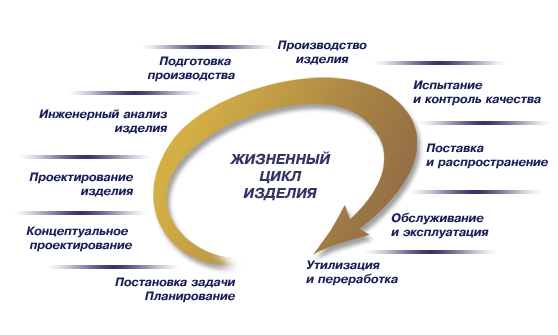
<style>
.page{position:relative;width:558px;height:335px;background:#ffffff}
.page>*{position:absolute;margin:0}
.t1{font:12px "PragmaticaBoldItalic";color:#1a1f57}
.t2{font:14px "PragmaticaBoldItalic";color:#333366}
</style>
<div class="page">
<p class="t1" style="left:277px;top:40px;width:90px;height:25px;text-align:center">Ïðîèçâîäñòâî<br>èçäåëèÿ</p>
<p class="t1" style="left:147px;top:56px;width:88px;height:26px;text-align:right">Ïîäãîòîâêà <br>ïðîèçâîäñòâà</p>
<p class="t1" style="left:413px;top:80px;width:128px;height:26px">Èñïûòàíèå <br>è êîíòðîëü êà÷åñòâà</p>
<p class="t1" style="left:39px;top:109px;width:129px;height:25px;text-align:right">Èíæåíåðíûé àíàëèç<br>èçäåëèÿ</p>
<p class="t1" style="left:426px;top:143px;width:122px;height:26px">Ïîñòàâêà<br>è ðàñïðîñòðàíåíèå</p>
<p class="t2" style="left:229px;top:151px;width:102px;height:50px;text-align:center">ÆÈÇÍÅÍÍÛÉ<br>ÖÈÊË<br>ÈÇÄÅËÈß</p>
<p class="t1" style="left:29px;top:172px;width:105px;height:25px;text-align:right">Ïðîåêòèðîâàíèå<br>èçäåëèÿ</p>
<p class="t1" style="left:391px;top:212px;width:98px;height:27px">Îáñëóæèâàíèå<br>è ýêñïëóàòàöèÿ</p>
<p class="t1" style="left:26px;top:226px;width:106px;height:26px;text-align:right">Êîíöåïòóàëüíîå <br>ïðîåêòèðîâàíèå</p>
<p class="t1" style="left:306px;top:260px;width:92px;height:26px">Óòèëèçàöèÿ<br>è ïåðåðàáîòêà</p>
<p class="t1" style="left:115px;top:277px;width:121px;height:26px;text-align:right">Ïîñòàíîâêà çàäà÷è<br>Ïëàíèðîâàíèå</p>
</div>
